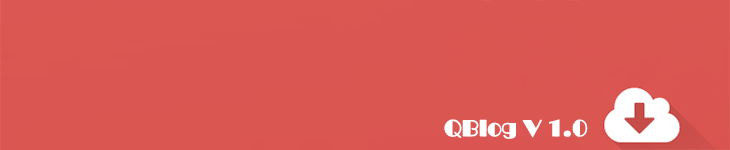
<style>
.page{position:relative;width:730px;height:150px;background:#da5651}
.page>*{position:absolute;margin:0}
.t1{font:25px "UKIJEsliyeChiwer";letter-spacing:-0.02em;color:#ffffff;font-weight:bold}
</style>
<div class="page">
<p class="t1" style="left:444px;top:119px;width:144px;height:20px">QBlog V 1.0</p>
</div>
